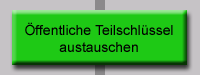
<style>
.page{position:relative;width:200px;height:75px;background:#1ec915}
.page>*{position:absolute;margin:0}
.t1{font:14px "ArialMT";color:#000000}
</style>
<div class="page">
<p class="t1" style="left:25px;top:22px;width:148px;height:30px;text-align:center">Öffentliche Teilschlüssel<br>austauschen</p>
</div>
